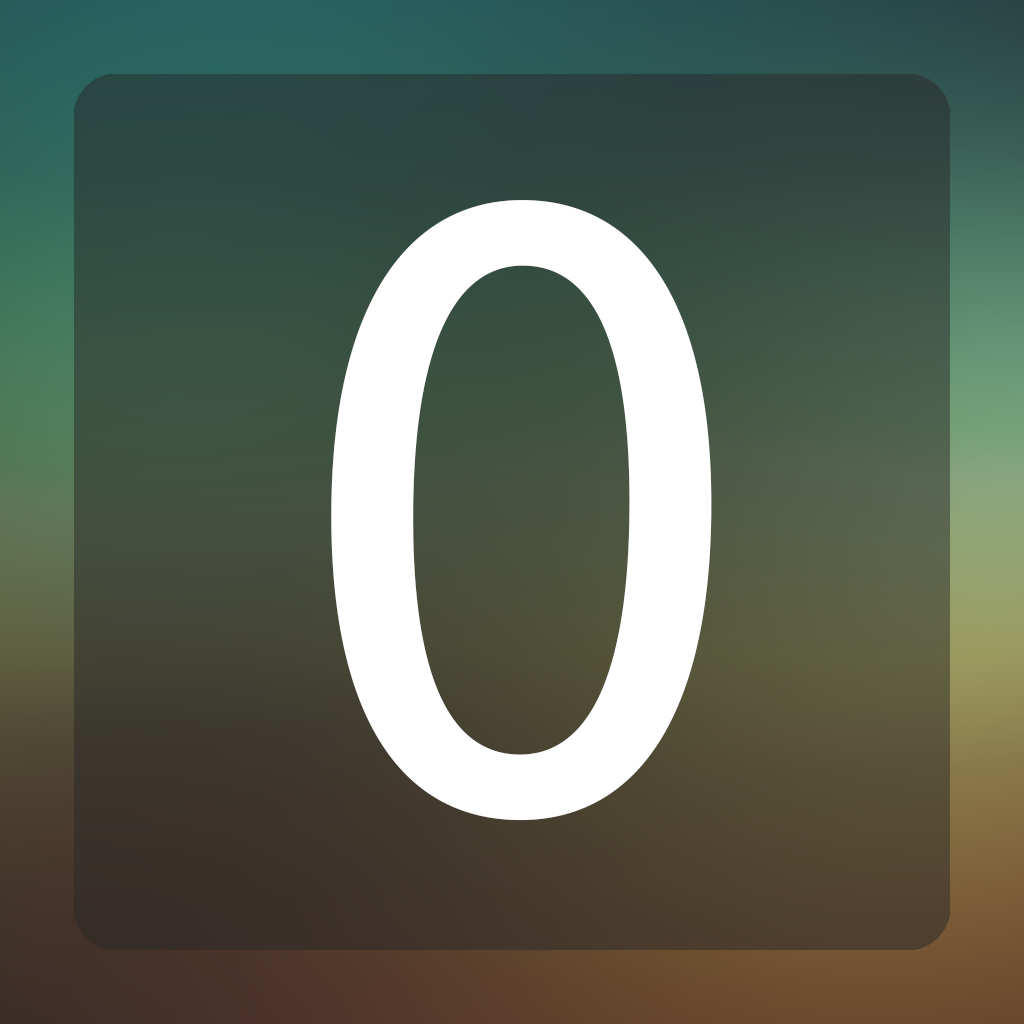
<style>
.page{position:relative;width:1024px;height:1024px}
.page>*{position:absolute;margin:0}
.t1{font:909px "Vegur-Regular";color:#ffffff}
</style>
<div class="page">
<p class="t1" style="left:331px;top:200px;width:381px;height:621px">0</p>
</div>
